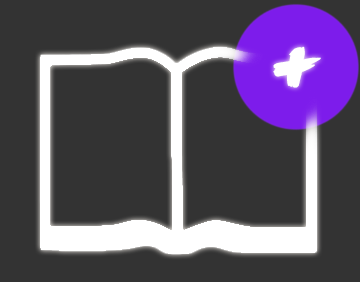
<style>
.page{position:relative;width:360px;height:282px;background:#333333}
.page>*{position:absolute;margin:0}
.t1{font:84px "outrunfuture";color:#ffffff}
</style>
<div class="page">
<p class="t1" style="left:273px;top:46px;width:48px;height:42px">+</p>
</div>
